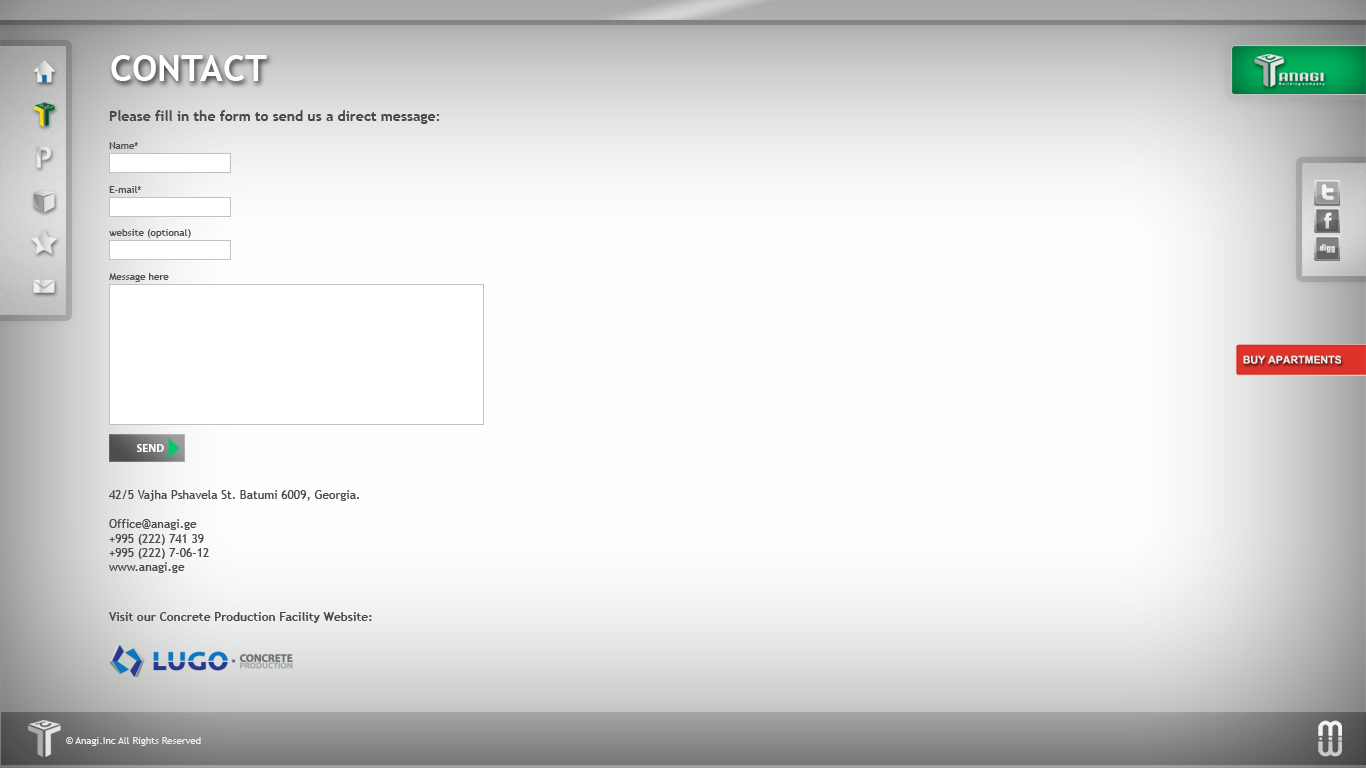
<style>
.page{position:relative;width:1366px;height:768px;background:#fcfffd}
.page>*{position:absolute;margin:0}
.t1{font:36px "TrebuchetMS-Bold";color:#ffffff}
.t2{font:14px "TrebuchetMS-Bold";color:#4a4a4a}
.t3{font:10px "TrebuchetMS";color:#505050}
.t4{font:11.4px "MyriadPro-Bold";color:#ffffff}
.t5{font:12px "TrebuchetMS";color:#4a4a4a}
.t6{font:12px "TrebuchetMS-Bold";color:#4a4a4a}
.t7{font:9.8px "TrebuchetMS";color:#eeeeee}
</style>
<div class="page">
<p class="t1" style="left:111px;top:55px;width:156px;height:26px">CONTACT</p>
<p class="t2" style="left:109px;top:110px;width:331px;height:14px">Please fill in the form to send us a direct message:</p>
<p class="t3" style="left:109px;top:142px;width:29px;height:7px">Name*</p>
<p class="t3" style="left:109px;top:186px;width:32px;height:7px">E-mail*</p>
<p class="t3" style="left:109px;top:229px;width:82px;height:9px">website (optional)</p>
<p class="t3" style="left:109px;top:273px;width:60px;height:9px">Message here</p>
<p class="t4" style="left:137px;top:444px;width:27px;height:8px">SEND</p>
<p class="t5" style="left:109px;top:490px;width:250px;height:83px">42/5 Vajha Pshavela St. Batumi 6009, Georgia.<br><br>Office@anagi.ge<br>+995 (222) 741 39<br>+995 (222) 7-06-12<br>www.anagi.ge</p>
<p class="t6" style="left:109px;top:612px;width:263px;height:11px">Visit our Concrete Production Facility Website:</p>
<p class="t7" style="left:66px;top:737px;width:135px;height:9px">© Anagi.Inc All Rights Reserved</p>
</div>
